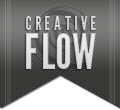
<style>
.page{position:relative;width:120px;height:110px}
.page>*{position:absolute;margin:0}
.t1{font:18px "LeagueGothic";letter-spacing:0.2em;color:#c5c5c5;text-transform:uppercase}
.t2{font:48px "LeagueGothic";color:#dbdcdc;text-transform:uppercase}
</style>
<div class="page">
<p class="t1" style="left:26px;top:16px;width:70px;height:14px">creative</p>
<p class="t2" style="left:26px;top:33px;width:70px;height:36px">flow</p>
</div>
